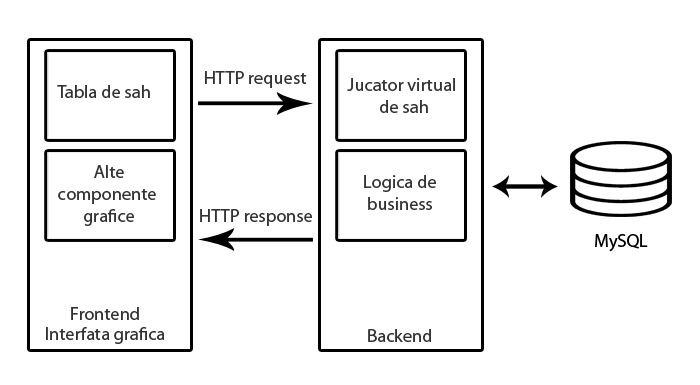
<style>
.page{position:relative;width:700px;height:385px;background:#ffffff}
.page>*{position:absolute;margin:0}
.t1{font:18.3px "MyriadPro-Regular";color:#333333}
.t2{font:18.3px "MyriadPro-Regular";color:#000000}
</style>
<div class="page">
<p class="t1" style="left:205px;top:71px;width:102px;height:17px">HTTP request</p>
<p class="t1" style="left:347px;top:78px;width:108px;height:35px;text-align:center">Jucator virtual <br>de sah</p>
<p class="t1" style="left:57px;top:85px;width:93px;height:13px">Tabla de sah</p>
<p class="t1" style="left:58px;top:165px;width:98px;height:61px;text-align:center">Alte<br>componente <br>grafice</p>
<p class="t1" style="left:364px;top:175px;width:72px;height:35px;text-align:center">Logica de<br>business</p>
<p class="t1" style="left:200px;top:209px;width:112px;height:17px">HTTP response</p>
<p class="t2" style="left:595px;top:234px;width:53px;height:18px">MySQL</p>
<p class="t1" style="left:71px;top:307px;width:68px;height:13px">Frontend</p>
<p class="t1" style="left:46px;top:327px;width:119px;height:17px">Interfata grafica</p>
<p class="t1" style="left:368px;top:329px;width:63px;height:13px">Backend</p>
</div>
